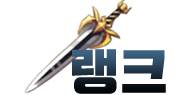
<style>
.page{position:relative;width:186px;height:95px;background:#ffffff}
.page>*{position:absolute;margin:0}
.t1{font:50px "Typo_SsangmunDong_B"}
</style>
<div class="page">
<p class="t1" style="left:72px;top:49px;width:94px;height:45px">랭크</p>
</div>
